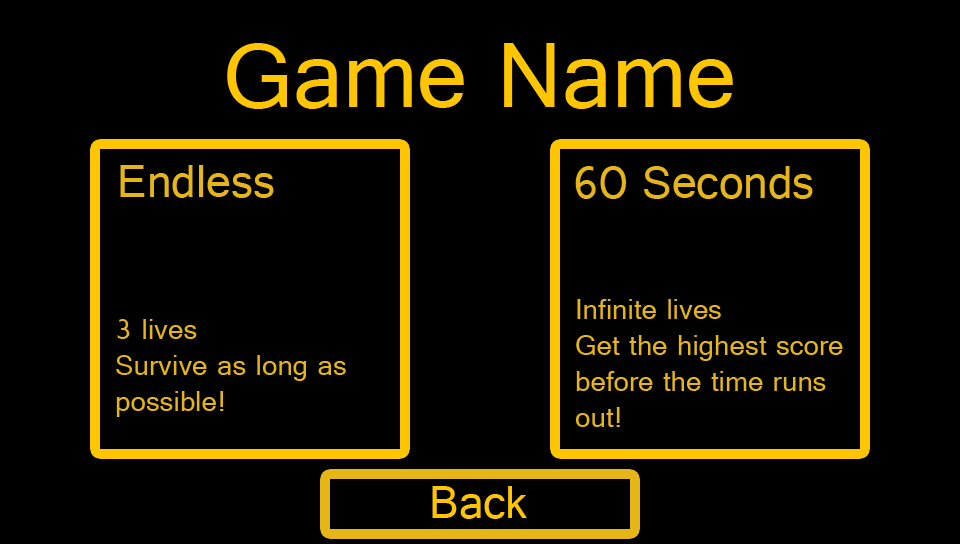
<style>
.page{position:relative;width:960px;height:544px;background:#000000}
.page>*{position:absolute;margin:0}
.t1{font:97px "Gautami";color:#ffc600}
.t2{font:48px "Gautami";color:#e5b615}
.t3{font:30px "Gautami";color:#e5b615}
.t4{font:48px "Gautami";color:#ffc600}
</style>
<div class="page">
<p class="t1" style="left:227px;top:43px;width:506px;height:66px">Game Name</p>
<p class="t2" style="left:120px;top:165px;width:154px;height:33px">Endless</p>
<p class="t2" style="left:575px;top:166px;width:238px;height:33px">60 Seconds</p>
<p class="t3" style="left:576px;top:299px;width:267px;height:128px">Infinite lives<br>Get the highest score<br>before the time runs<br>out!</p>
<p class="t3" style="left:116px;top:319px;width:230px;height:98px">3 lives<br>Survive as long as<br>possible!</p>
<p class="t4" style="left:432px;top:486px;width:95px;height:33px">Back</p>
</div>
